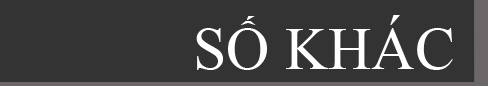
<style>
.page{position:relative;width:488px;height:86px;background:#333333}
.page>*{position:absolute;margin:0}
.t1{font:60px "TimesNewRomanPSMT";color:#ffffff}
</style>
<div class="page">
<p class="t1" style="left:196px;top:15px;width:257px;height:55px">SỐ KHÁC</p>
</div>
